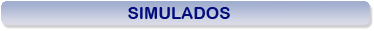
<style>
.page{position:relative;width:374px;height:31px}
.page>*{position:absolute;margin:0}
.t1{font:16.9px "ArialRoundedMTBold";color:#040f7e}
</style>
<div class="page">
<p class="t1" style="left:128px;top:7px;width:102px;height:12px">SIMULADOS</p>
</div>
